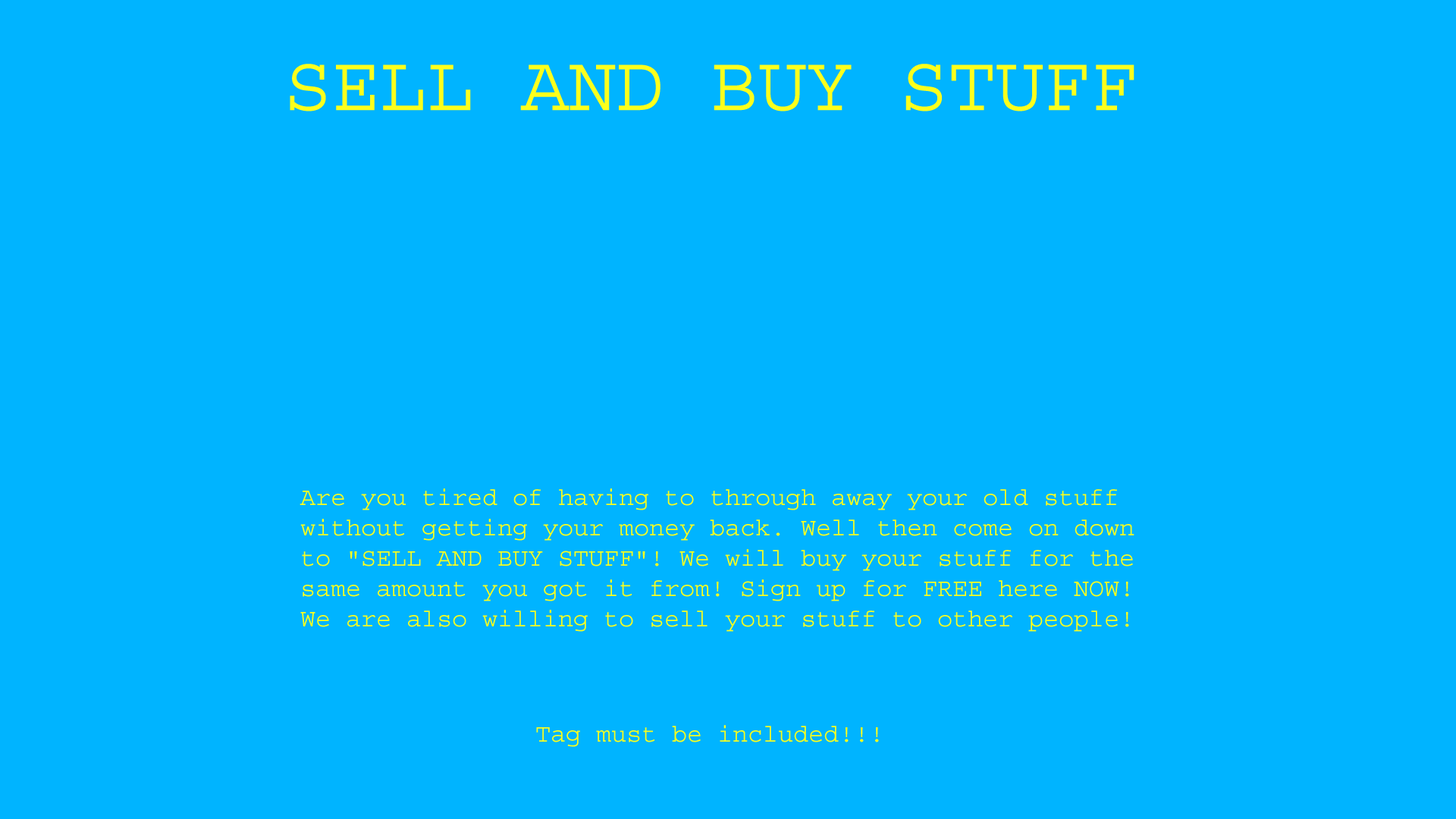
<style>
.page{position:relative;width:1456px;height:819px;background:#00b4ff}
.page>*{position:absolute;margin:0}
.t1{font:79px "Courier";color:#fcff1c}
.t2{font:25.3px "Courier";color:#fcff1c}
</style>
<div class="page">
<p class="t1" style="left:290px;top:64px;width:844px;height:47px">SELL AND BUY STUFF <br>\</p>
<p class="t2" style="left:300px;top:488px;width:834px;height:144px">Are you tired of having to through away your old stuff without getting your money back. Well then come on down to "SELL AND BUY STUFF"! We will buy your stuff for the same amount you got it from! Sign up for FREE here NOW!<br>We are also willing to sell your stuff to other people!</p>
<p class="t2" style="left:536px;top:725px;width:343px;height:22px">Tag must be included!!!</p>
</div>
